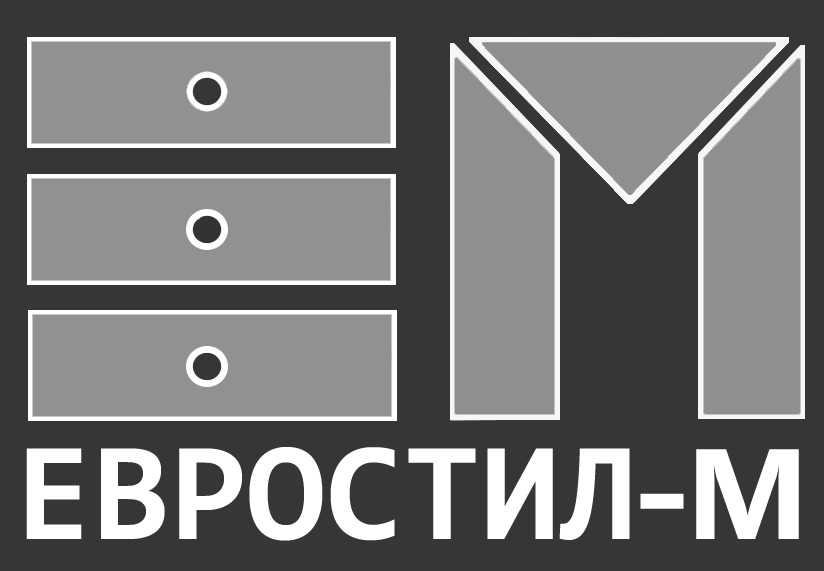
<style>
.page{position:relative;width:824px;height:571px;background:#363636}
.page>*{position:absolute;margin:0}
.t1{font:141.7px "Consolas-Bold";color:#ffffff}
.t2{font:141.7px "Consolas-Bold";letter-spacing:-0.1em;color:#ffffff}
.t3{font:128.3px "MicrosoftTaiLe-Bold";color:#ffffff}
</style>
<div class="page">
<p class="t1" style="left:26px;top:447px;width:773px;height:94px">ЕВРОСТИ<span class="t2">Л-</span><span class="t3">M</span></p>
</div>
